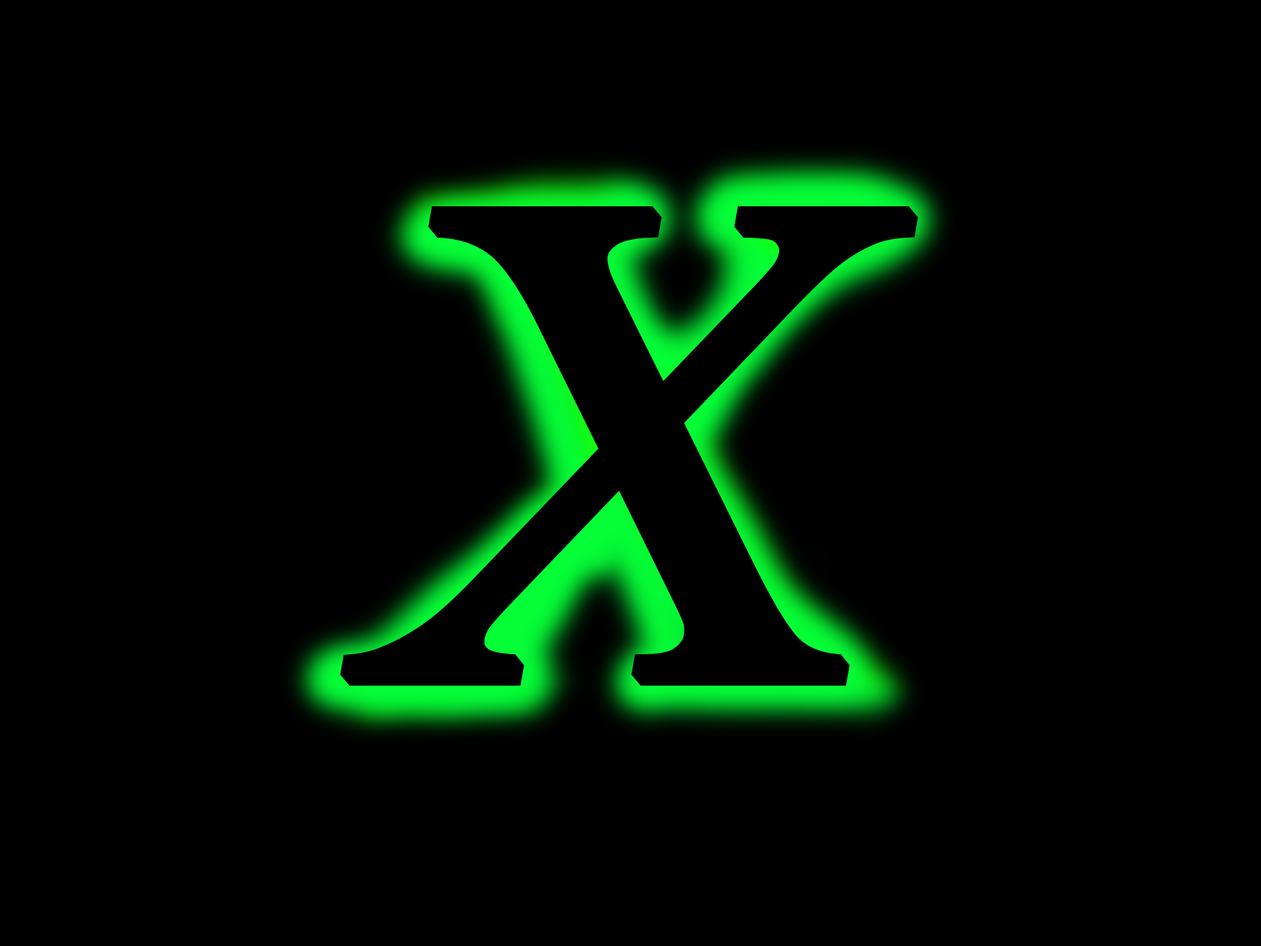
<style>
.page{position:relative;width:1261px;height:946px;background:#000000}
.page>*{position:absolute;margin:0}
.t1{font:695.1px "TimesNewRomanPSMT";color:#000000;font-weight:bold;font-style:italic}
</style>
<div class="page">
<p class="t1" style="left:340px;top:206px;width:578px;height:480px">X</p>
</div>
